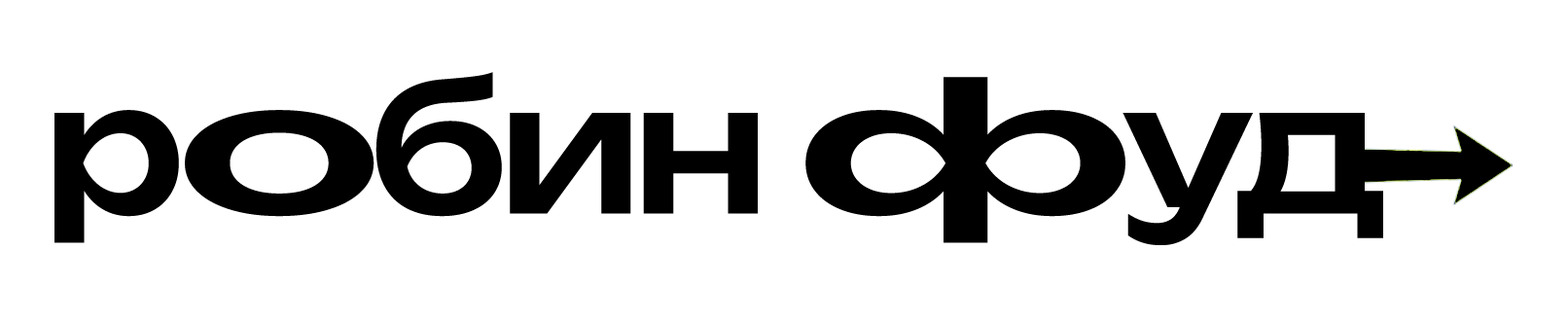
<style>
.page{position:relative;width:1568px;height:321px;background:#ffffff}
.page>*{position:absolute;margin:0}
.t1{font:176.7px "Unbounded-Medium";letter-spacing:-0.05em;color:#000000}
.t2{font:176.7px "Unbounded-Medium";letter-spacing:-0.05em;color:#000000;scale:1.5 1}
</style>
<div class="page">
<p class="t1" style="left:54px;top:72px;width:1329px;height:173px">р<span class="t2">о</span>бин <span class="t2">ф</span>уд</p>
</div>
